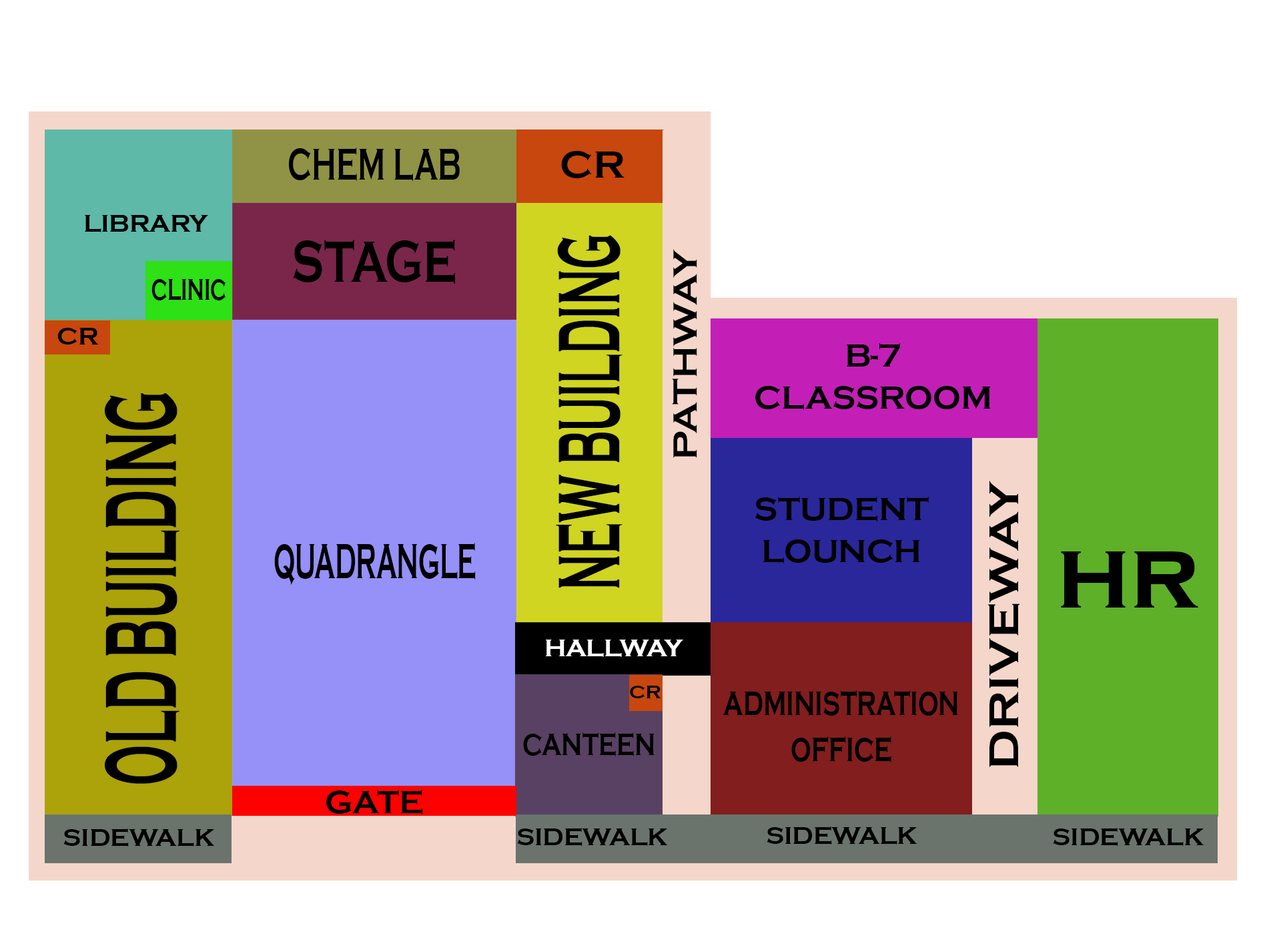
<style>
.page{position:relative;width:1261px;height:946px;background:#ffffff}
.page>*{position:absolute;margin:0}
.t1{font:45.4px "CopperplateGothic-Bold";color:#000000;scale:0.63 1}
.t2{font:39.6px "CopperplateGothic-Bold";color:#000000}
.t3{font:25.1px "CopperplateGothic-Bold";color:#000000}
.t4{font:60px "CopperplateGothic-Bold";color:#000000;scale:0.74 1}
.t5{font:90.7px "CopperplateGothic-Bold";color:#000000;scale:0.46 1}
.t6{font:35.1px "CopperplateGothic-Bold";color:#000000;scale:1.09 1}
.t7{font:31.2px "CopperplateGothic-Bold";color:#000000;scale:0.62 1}
.t8{font:32.6px/42px "CopperplateGothic-Bold";color:#000000}
.t9{font:104.9px "CopperplateGothic-Bold";color:#000000;scale:0.46 1}
.t10{font:43.1px "CopperplateGothic-Bold";color:#000000;scale:1.11 1}
.t11{font:51.5px "CopperplateGothic-Bold";color:#000000;scale:0.49 1}
.t12{font:101.9px "CopperplateGothic-Bold";color:#000000}
.t13{font:25.1px "CopperplateGothic-Bold";color:#ffffff}
.t14{font:19.4px "CopperplateGothic-Bold";color:#000000}
.t15{font:35.6px/45.9px "CopperplateGothic-Bold";color:#000000;scale:0.67 1}
.t16{font:32.2px "CopperplateGothic-Bold";color:#000000;scale:0.74 1}
.t17{font:32.6px "CopperplateGothic-Bold";color:#000000}
</style>
<div class="page">
<p class="t1" style="left:288px;top:147px;width:172px;height:34px">CHEM LAB</p>
<p class="t2" style="left:561px;top:151px;width:64px;height:27px">CR</p>
<p class="t3" style="left:85px;top:215px;width:123px;height:17px">LIBRARY</p>
<p class="t4" style="left:293px;top:240px;width:162px;height:44px">STAGE</p>
<p class="t5" style="left:556px;top:235px;width:67px;height:353px;rotate:-90deg">NEW BUILDING</p>
<p class="t6" style="left:672px;top:249px;width:25px;height:209px;rotate:-90deg">PATHWAY</p>
<p class="t7" style="left:151px;top:279px;width:75px;height:21px">CLINIC</p>
<p class="t3" style="left:57px;top:328px;width:42px;height:16px">CR</p>
<p class="t8" style="left:755px;top:343px;width:236px;height:67px;text-align:center">B-7<br>CLASSROOM</p>
<p class="t9" style="left:105px;top:393px;width:74px;height:390px;rotate:-90deg">OLD BUILDING</p>
<p class="t10" style="left:988px;top:480px;width:32px;height:287px;rotate:-90deg">DRIVEWAY</p>
<p class="t8" style="left:755px;top:496px;width:174px;height:67px;text-align:center">STUDENT<br>LOUNCH</p>
<p class="t11" style="left:274px;top:542px;width:202px;height:43px">QUADRANGLE</p>
<p class="t12" style="left:1061px;top:551px;width:137px;height:56px">hr</p>
<p class="t13" style="left:546px;top:639px;width:137px;height:18px">HALLWAY</p>
<p class="t14" style="left:630px;top:685px;width:31px;height:13px">CR</p>
<p class="t15" style="left:723px;top:690px;width:235px;height:72px;text-align:center">ADMINISTRATION<br>OFFICE</p>
<p class="t16" style="left:523px;top:732px;width:132px;height:24px">CANTEEN</p>
<p class="t17" style="left:326px;top:789px;width:97px;height:25px">GATE</p>
<p class="t3" style="left:63px;top:828px;width:152px;height:18px">SIDEWALK</p>
<p class="t3" style="left:517px;top:827px;width:151px;height:18px">SIDEWALK</p>
<p class="t3" style="left:767px;top:826px;width:150px;height:18px">SIDEWALK</p>
<p class="t3" style="left:1053px;top:827px;width:151px;height:18px">SIDEWALK</p>
</div>
